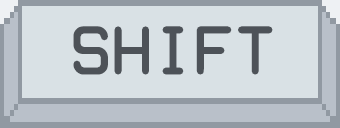
<style>
.page{position:relative;width:340px;height:128px;background:#d9e1e5}
.page>*{position:absolute;margin:0}
.t1{font:72px "WhiteRabbit";color:#4d5258}
</style>
<div class="page">
<p class="t1" style="left:73px;top:26px;width:200px;height:49px">SHIFT</p>
</div>
